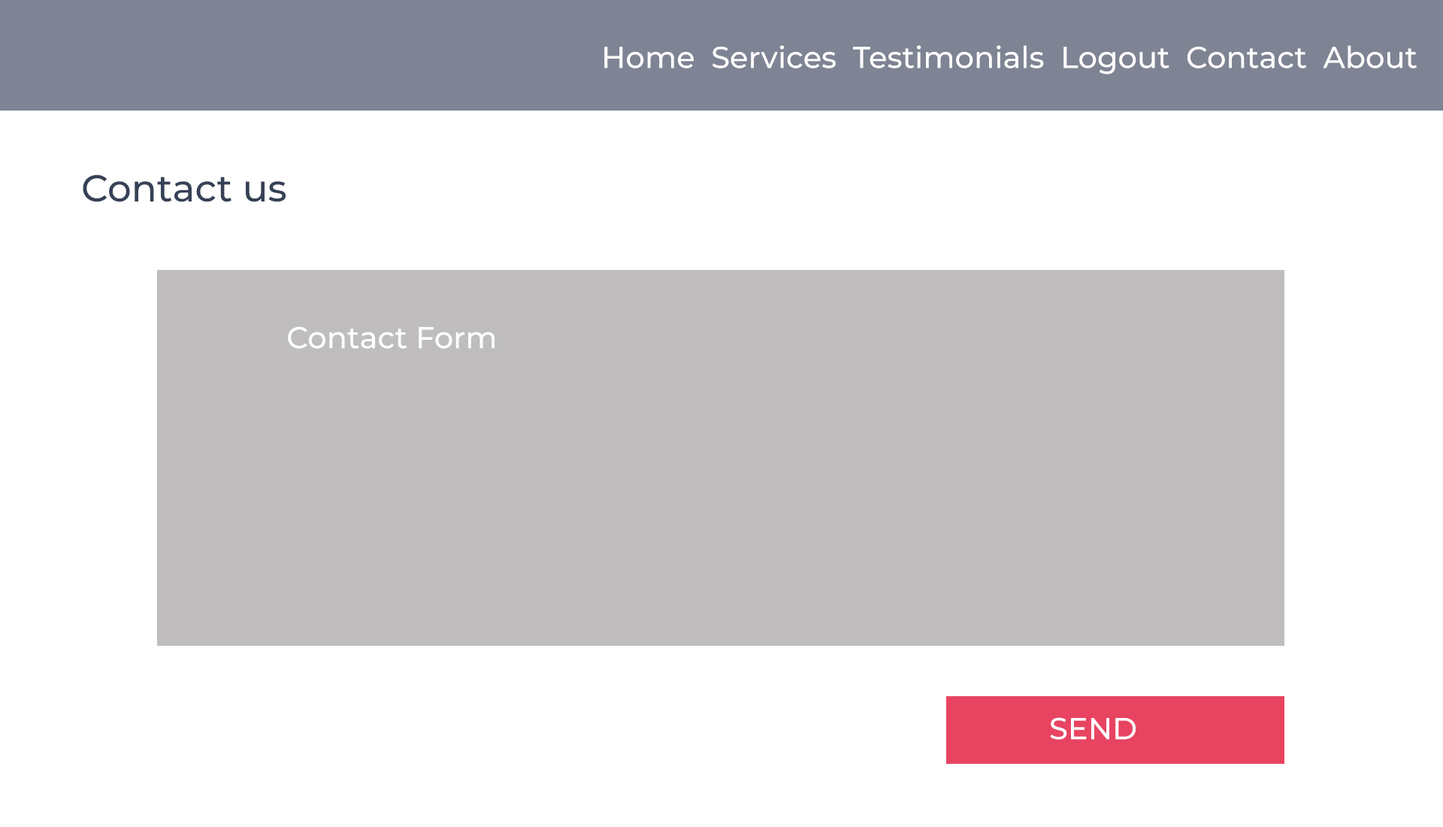
<style>
.page{position:relative;width:1443px;height:827px;background:#ffffff}
.page>*{position:absolute;margin:0}
.t1{font:30.1px "Montserrat-Medium";color:#ffffff}
.t2{font:37.6px "Montserrat-Medium";color:#364156}
</style>
<div class="page">
<p class="t1" style="left:604px;top:45px;width:812px;height:29px">Home  Services  Testimonials  Logout  Contact  About</p>
<p class="t2" style="left:83px;top:174px;width:203px;height:28px">Contact us</p>
<p class="t1" style="left:288px;top:326px;width:206px;height:23px">Contact Form</p>
<p class="t1" style="left:1050px;top:717px;width:85px;height:22px">SEND</p>
</div>
